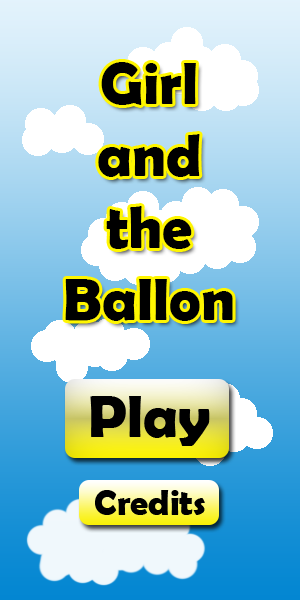
<style>
.page{position:relative;width:300px;height:600px}
.page>*{position:absolute;margin:0}
.t1{font:60px "BerlinSansFBDemi-Bold";color:#000000}
</style>
<div class="page">
<p class="t1" style="left:65px;top:62px;width:168px;height:259px;text-align:center">Girl<br>and<br>the<br>Ballon</p>
</div>
